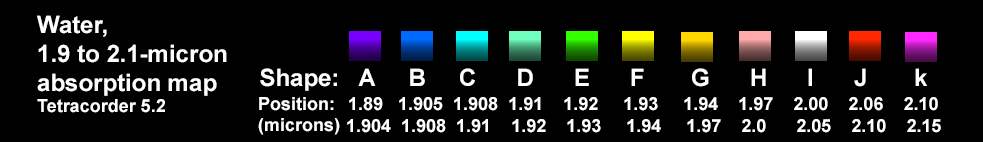
<style>
.page{position:relative;width:983px;height:142px;background:#000000}
.page>*{position:absolute;margin:0}
.t1{font:24px "Arial-BoldMT";color:#fefefe}
.t2{font:18px "Arial-BoldMT";color:#fefefe}
.t3{font:24px "Arial-BoldMT";color:#ffffff}
.t4{font:18px "Arial-BoldMT";color:#ffffff}
</style>
<div class="page">
<p class="t1" style="left:37px;top:15px;width:190px;height:98px">Water, <br>1.9 to 2.1-micron <br>absorption map<br><span class="t2">Tetracorder 5.2</span></p>
<p class="t3" style="left:260px;top:68px;width:667px;height:23px">Shape:   A     B     C      D      E      F       G      H      I      J       k</p>
<p class="t4" style="left:258px;top:97px;width:82px;height:38px">Position:<br>(microns)</p>
<p class="t4" style="left:349px;top:97px;width:589px;height:14px">1.89   1.905  1.908  1.91    1.92     1.93     1.94    1.97    2.00    2.06    2.10</p>
<p class="t4" style="left:347px;top:119px;width:594px;height:14px">1.904  1.908  1.91    1.92    1.93     1.94     1.97    2.0      2.05    2.10    2.15</p>
</div>
